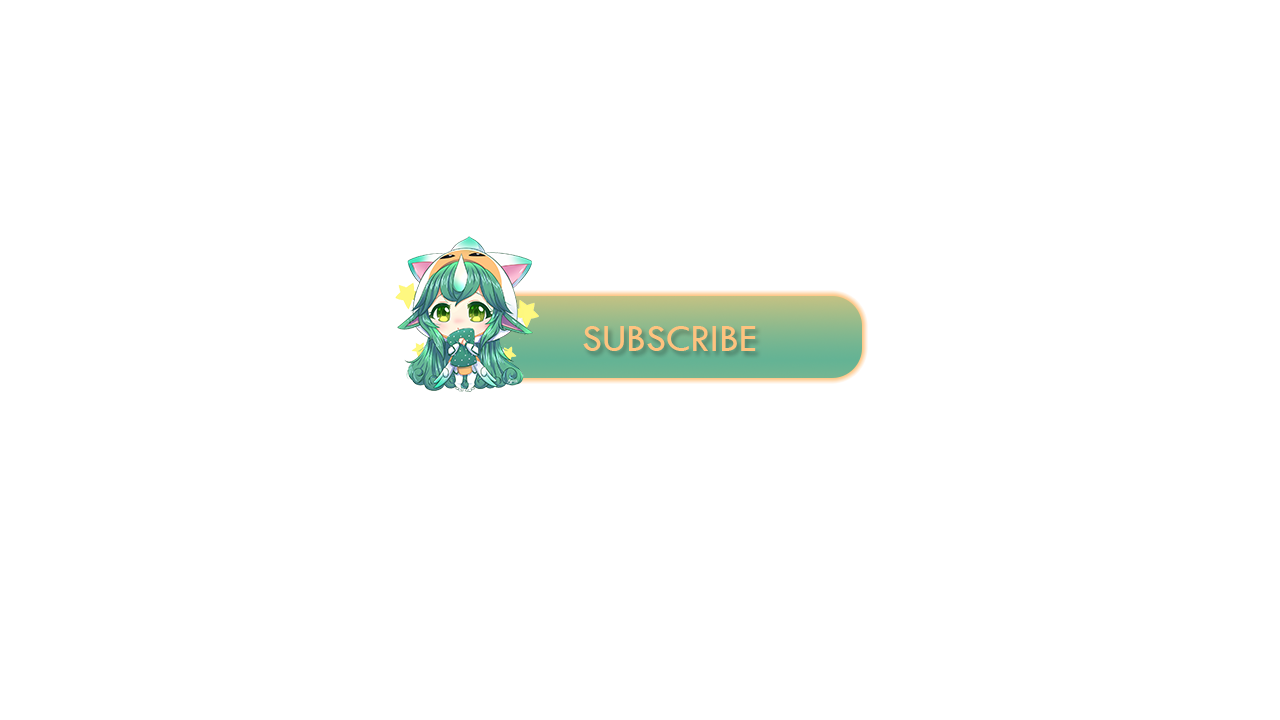
<style>
.page{position:relative;width:1280px;height:720px;background:#ffffff}
.page>*{position:absolute;margin:0}
.t1{font:40px "TwCenMT-Regular";color:#fec37f}
</style>
<div class="page">
<p class="t1" style="left:583px;top:326px;width:173px;height:25px">SUBSCRIBE</p>
</div>
